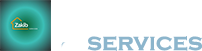
<style>
.page{position:relative;width:202px;height:51px;background:#ffffff}
.page>*{position:absolute;margin:0}
.t1{font:24px "CopperplateGothic-Bold";color:#8cb5cc}
</style>
<div class="page">
<p class="t1" style="left:87px;top:36px;width:115px;height:15px">services</p>
</div>
